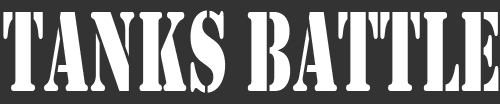
<style>
.page{position:relative;width:500px;height:104px;background:#333333}
.page>*{position:absolute;margin:0}
.t1{font:118px "Stencil";color:#ffffff;scale:0.6 1}
</style>
<div class="page">
<p class="t1" style="left:3px;top:10px;width:496px;height:83px">Tanks Battle</p>
</div>
